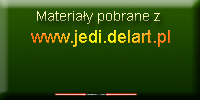
<style>
.page{position:relative;width:200px;height:100px}
.page>*{position:absolute;margin:0}
.t1{font:14px "ArialMT"}
.t2{font:18px "ArialMT"}
</style>
<div class="page">
<p class="t1" style="left:37px;top:11px;width:123px;height:13px">Materiały pobrane z</p>
<p class="t2" style="left:31px;top:30px;width:139px;height:17px">www.jedi.delart.pl</p>
</div>
